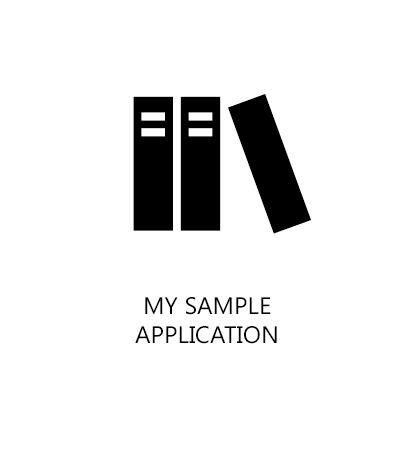
<style>
.page{position:relative;width:414px;height:468px;background:#ffffff}
.page>*{position:absolute;margin:0}
.t1{font:24px "SegoeUISymbol";color:#000000}
</style>
<div class="page">
<p class="t1" style="left:135px;top:297px;width:142px;height:47px;text-align:center">MY SAMPLE<br>APPLICATION</p>
</div>
